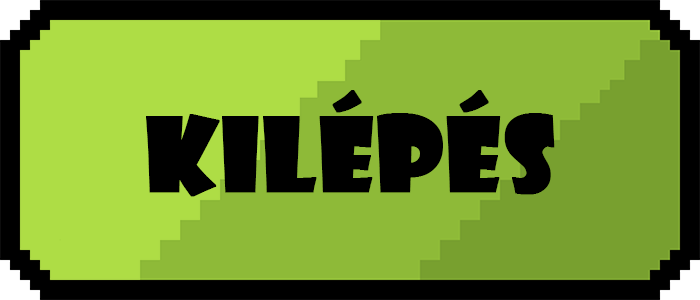
<style>
.page{position:relative;width:700px;height:300px;background:#000000}
.page>*{position:absolute;margin:0}
.t1{font:100px "ShowcardGothic-Reg";letter-spacing:0.001em;color:#000000;font-weight:bold}
</style>
<div class="page">
<p class="t1" style="left:146px;top:90px;width:409px;height:107px">kilépés</p>
</div>
